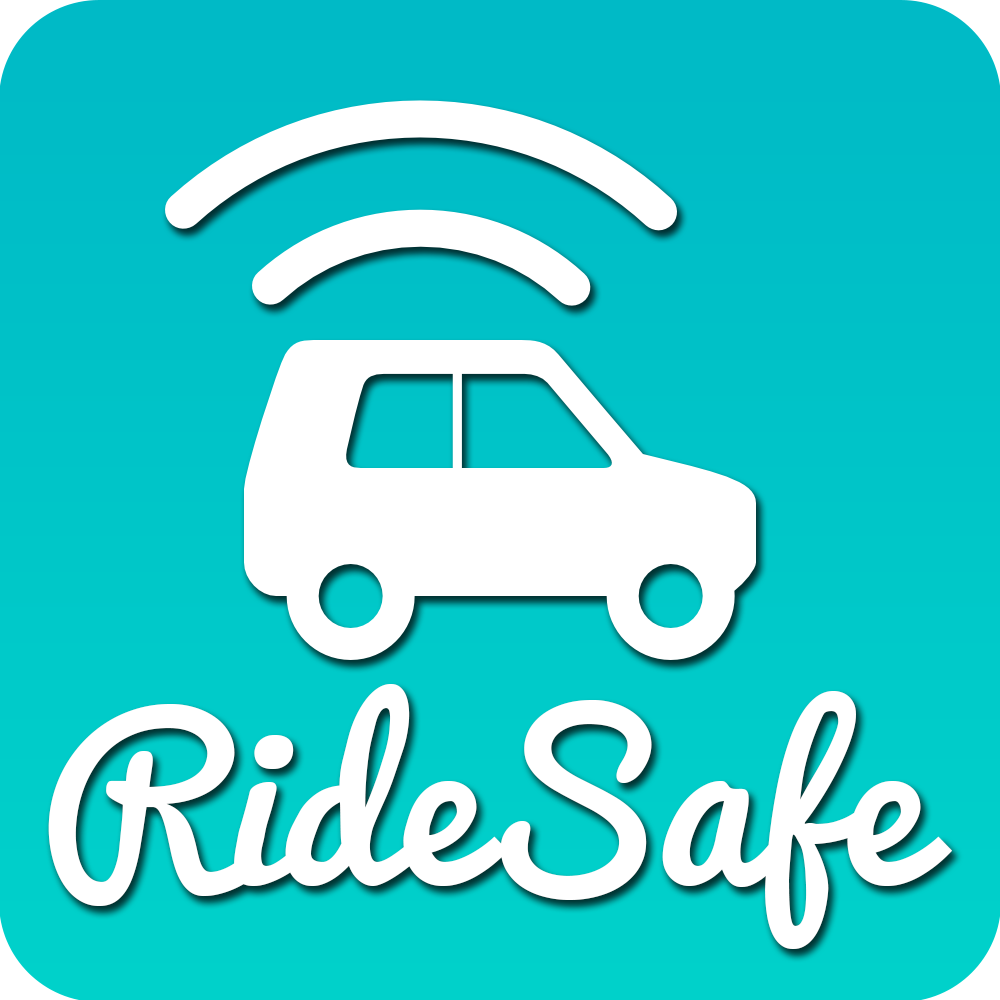
<style>
.page{position:relative;width:1000px;height:1000px;background:#ffffff}
.page>*{position:absolute;margin:0}
.t1{font:216.3px "Pacifico";color:#ffffff}
</style>
<div class="page">
<p class="t1" style="left:48px;top:684px;width:904px;height:265px">RideSafe</p>
</div>
